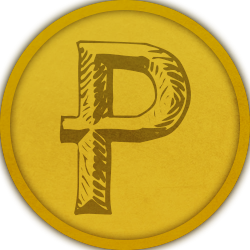
<style>
.page{position:relative;width:250px;height:250px}
.page>*{position:absolute;margin:0}
.t1{font:219.3px "WoodRelief";letter-spacing:-0.05em;color:#86650f}
</style>
<div class="page">
<p class="t1" style="left:59px;top:40px;width:132px;height:176px">P</p>
</div>
